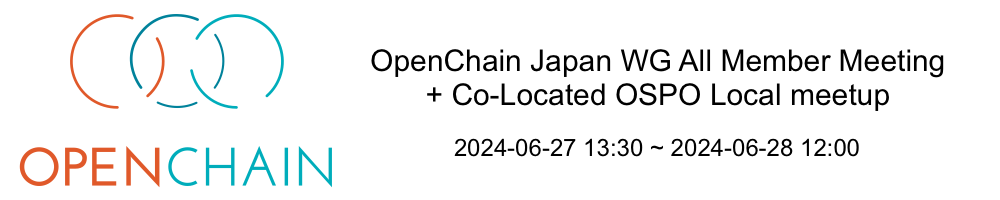
<style>
.page{position:relative;width:1000px;height:200px;background:#ffffff}
.page>*{position:absolute;margin:0}
.t1{font:30px/27px "ArialMT";color:#000000}
.t2{font:30px/34px "ArialMT";color:#000000}
.t3{font:24px "ArialMT";color:#000000}
</style>
<div class="page">
<p class="t1" style="left:371px;top:49px;width:573px;height:62px;text-align:center">OpenChain Japan WG All Member Meeting <br><span class="t2">+ Co-Located OSPO Local meetup</span></p>
<p class="t3" style="left:454px;top:138px;width:405px;height:19px">2024-06-27 13:30 ~ 2024-06-28 12:00</p>
</div>
